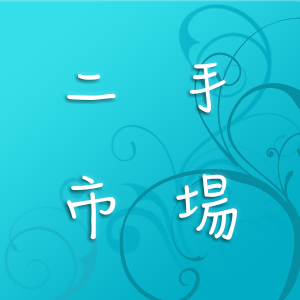
<style>
.page{position:relative;width:300px;height:300px}
.page>*{position:absolute;margin:0}
.t1{font:105px "DFYun-W3-WINP-BF";letter-spacing:0.1em;color:#ffffff}
</style>
<div class="page">
<p class="t1" style="left:67px;top:62px;width:170px;height:178px">二手<br>市場</p>
</div>
